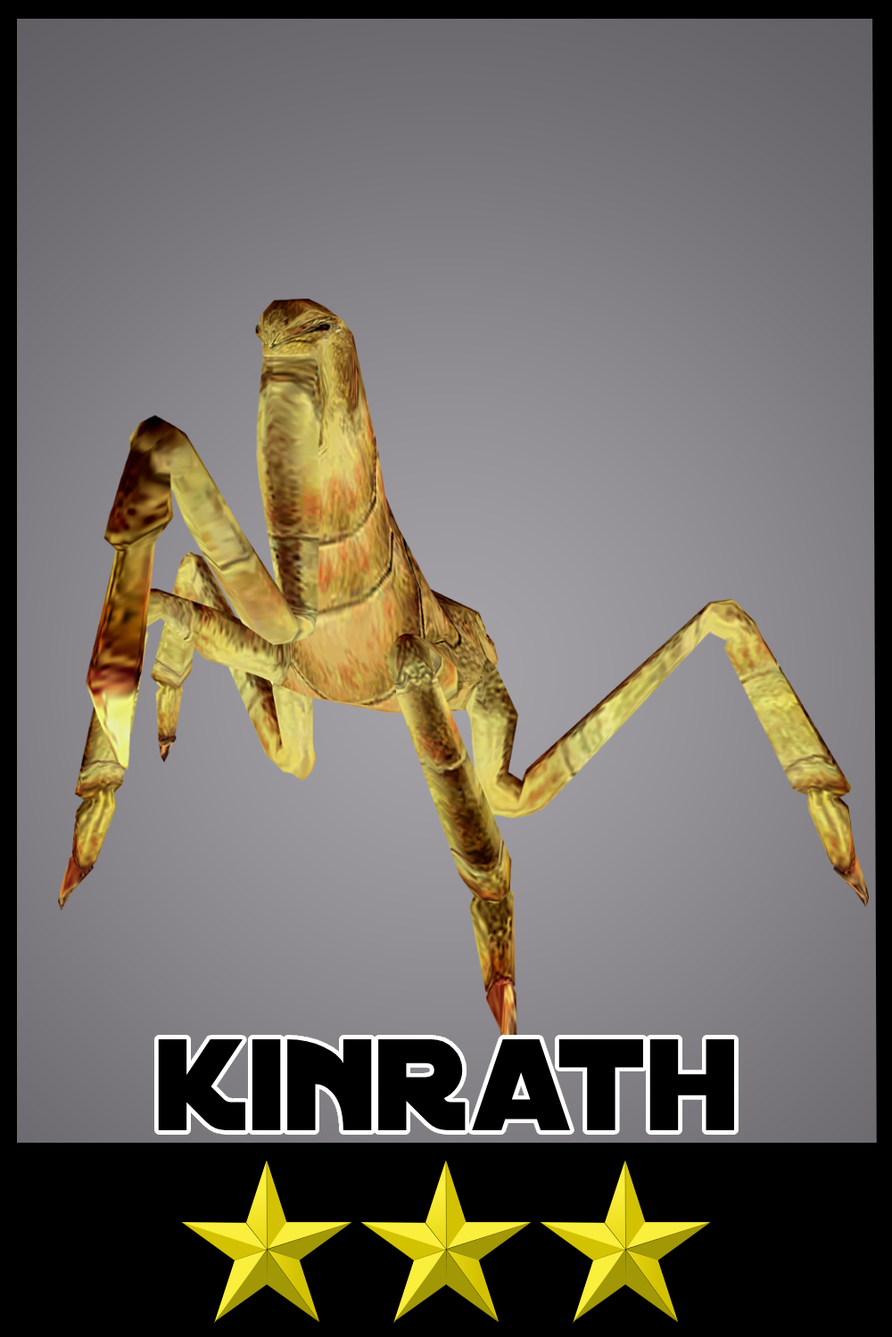
<style>
.page{position:relative;width:892px;height:1337px}
.page>*{position:absolute;margin:0}
.t1{font:139.9px "DistantGalaxy";color:#000000}
</style>
<div class="page">
<p class="t1" style="left:158px;top:1040px;width:576px;height:91px">kinrath</p>
</div>
